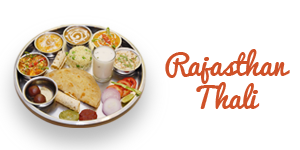
<style>
.page{position:relative;width:300px;height:150px;background:#ffffff}
.page>*{position:absolute;margin:0}
.t1{font:27.8px "Pacifico";color:#cf5128}
</style>
<div class="page">
<p class="t1" style="left:165px;top:49px;width:125px;height:60px;text-align:center">Rajasthan<br>Thali</p>
</div>
